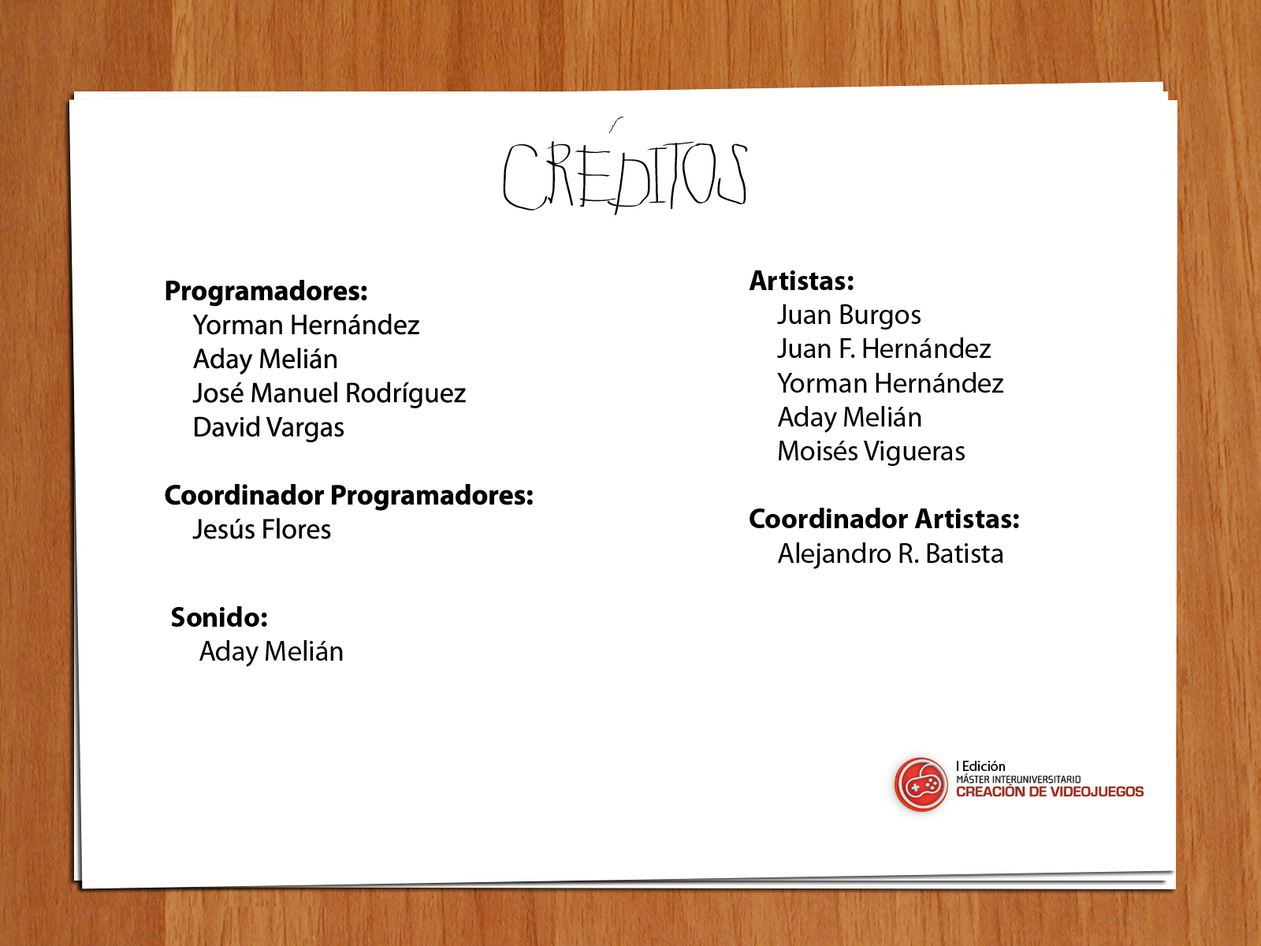
<style>
.page{position:relative;width:1261px;height:946px;background:#ffffff}
.page>*{position:absolute;margin:0}
.t1{font:28.4px "MyriadPro-Regular";color:#000000}
.t2{font:28.4px "MyriadPro-Bold";color:#000000}
.t3{font:14.2px "MyriadPro-Regular";color:#000000}
</style>
<div class="page">
<p class="t1" style="left:165px;top:280px;width:368px;height:259px"><span class="t2">Programadores:<br></span> Yorman Hernández<br> Aday Melián<br> José Manuel Rodríguez<br> David Vargas<br><br><span class="t2">Coordinador Programadores: <br></span> Jesús Flores</p>
<p class="t1" style="left:749px;top:270px;width:270px;height:299px"><span class="t2">Artistas: <br></span> Juan Burgos<br> Juan F. Hernández<br> Yorman Hernández<br> Aday Melián <br> Moisés Vigueras<br> <br><span class="t2">Coordinador Artistas:<br></span> Alejandro R. Batista</p>
<p class="t1" style="left:171px;top:606px;width:172px;height:61px"><span class="t2">Sonido:<br></span> Aday Melián</p>
<p class="t3" style="left:957px;top:760px;width:48px;height:11px">I Edición</p>
</div>
